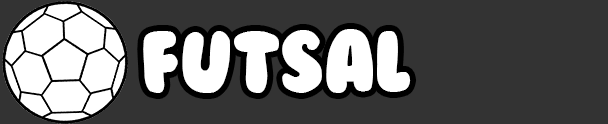
<style>
.page{position:relative;width:608px;height:124px;background:#333333}
.page>*{position:absolute;margin:0}
.t1{font:80px "BubbleGum";color:#ffffff}
</style>
<div class="page">
<p class="t1" style="left:143px;top:29px;width:268px;height:64px">Futsal</p>
</div>
